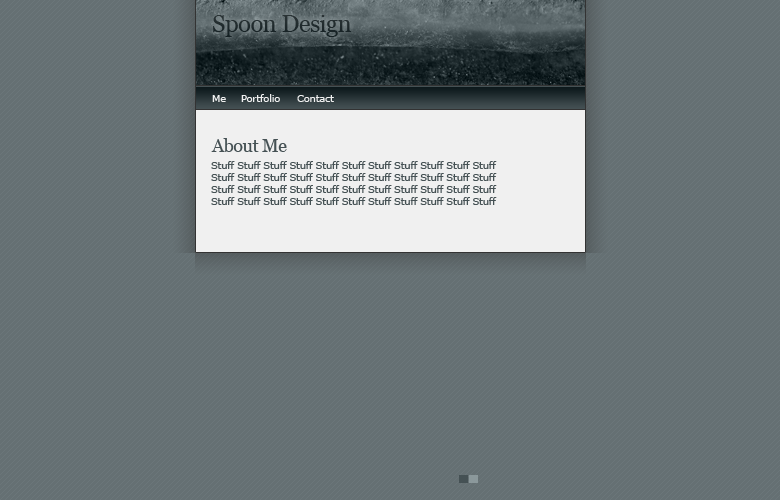
<style>
.page{position:relative;width:780px;height:500px;background:#657073}
.page>*{position:absolute;margin:0}
.t1{font:24px "Georgia";letter-spacing:-0.025em;color:#202a2d}
.t2{font:10px "Verdana";letter-spacing:-0.025em;color:#f0f0f0}
.t3{font:18px "Georgia";letter-spacing:-0.025em;color:#455154}
.t4{font:10px "Verdana";letter-spacing:-0.025em;color:#455154}
</style>
<div class="page">
<p class="t1" style="left:213px;top:15px;width:139px;height:22px">Spoon Design</p>
<p class="t2" style="left:212px;top:95px;width:14px;height:7px">Me</p>
<p class="t2" style="left:241px;top:94px;width:39px;height:8px">Portfolio</p>
<p class="t2" style="left:297px;top:95px;width:37px;height:7px">Contact</p>
<p class="t3" style="left:211px;top:138px;width:76px;height:14px">About Me</p>
<p class="t4" style="left:211px;top:161px;width:286px;height:44px">Stuff Stuff Stuff Stuff Stuff Stuff Stuff Stuff Stuff Stuff Stuff <br>Stuff Stuff Stuff Stuff Stuff Stuff Stuff Stuff Stuff Stuff Stuff <br>Stuff Stuff Stuff Stuff Stuff Stuff Stuff Stuff Stuff Stuff Stuff <br>Stuff Stuff Stuff Stuff Stuff Stuff Stuff Stuff Stuff Stuff Stuff</p>
</div>
